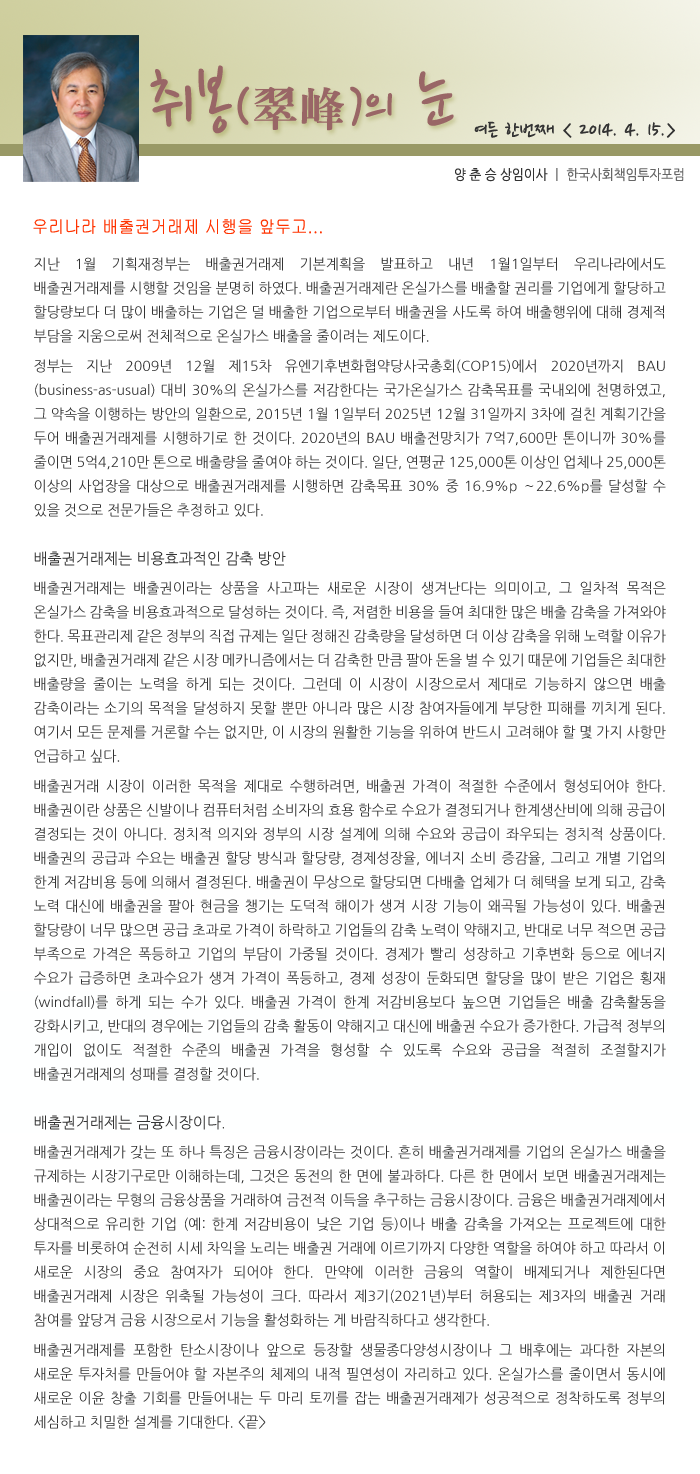
<style>
.page{position:relative;width:700px;height:1474px;background:#ffffff}
.page>*{position:absolute;margin:0}
.t1{font:77.5px "NanumPen";color:#996666}
.t2{font:60px "NanumPen";color:#996666}
.t3{font:48px "H2mjrE";color:#996666}
.t4{font:24px "NanumPen";color:#333333}
.t5{font:14px "NanumGothic";color:#666666;scale:0.9 1}
.t6{font:14px "NanumGothic";color:#333333;scale:0.9 1}
.t7{font:18px "Gulim";color:#ff3300;scale:0.9 1}
.t8{font:14px/24px "NanumGothic";color:#333333}
.t9{font:14px/6px "NanumGothic";color:#333333}
.t10{font:15px/24px "NanumGothic";color:#333333}
.t11{font:15px/6px "NanumGothic";color:#333333}
.t12{font:10px/24px "NanumGothic";color:#333333}
</style>
<div class="page">
<p class="t1" style="left:150px;top:65px;width:304px;height:69px">취봉<span class="t2">(</span><span class="t3">翠峰</span><span class="t2">)</span><span class="t2">의</span> 눈</p>
<p class="t4" style="left:474px;top:121px;width:201px;height:17px">여든 한번째 &lt; 2014. 4. 15.&gt;</p>
<p class="t5" style="left:455px;top:168px;width:229px;height:14px"><span class="t6">양 춘 승 상임이사 </span>ㅣ 한국사회책임투자포럼</p>
<p class="t7" style="left:33px;top:219px;width:289px;height:15px">우리나라 배출권거래제 시행을 앞두고...</p>
<p class="t8" style="left:34px;top:257px;width:632px;height:1172px;text-align:justify">지난 1월 기획재정부는 배출권거래제 기본계획을 발표하고 내년 1월1일부터 우리나라에서도 배출권거래제를 시행할 것임을 분명히 하였다. 배출권거래제란 온실가스를 배출할 권리를 기업에게 할당하고 할당량보다 더 많이 배출하는 기업은 덜 배출한 기업으로부터 배출권을 사도록 하여 배출행위에 대해 경제적 부담을 지움으로써 전<span class="t9">체적으로 온실가스 배출을 줄이려는 제도이다. <br><br>정부는 지난 2009년 12월 제</span>15차 유엔기후변화협약당사국총회(COP15)에서 2020년까지 BAU(business-as-usual) 대비 30%의 온실가스를 저감한다는 국가온실가스 감축목표를 국내외에 천명하였고, 그 약속을 이행하는 방안의 일환으로, 2015년 1월 1일부터 2025년 12월 31일까지 3차에 걸친 계획기간을 두어 배출권거래제를 시행하기로 한 것이다. 2020년의 BAU 배출전망치가 7억7,600만 톤이니까 30%를 줄이면 5억4,210만 톤으로 배출량을 줄여야 하는 것이다. 일단, 연평균 125,000톤 이상인 업체나 25,000톤 이상의 사업장을 대상으로 배출권거래제를 시행하면 감축목표 30% 중 16.9%p ∼22.6%p를 달성할 수 있을 것으로 전문가들은 추정하고 있다.<br><br><span class="t10">배출권거래제는 </span><span class="t11">비용효과적인 감축 방안<br><br></span><span class="t9">배출권거래제는 배출권이라는 상</span>품을 사고파는 새로운 시장이 생겨난다는 의미이고, 그 일차적 목적은 온실가스 감축을 비용효과적으로 달성하는 것이다. 즉, 저렴한 비용을 들여 최대한 많은 배출 감축을 가져와야 한다. 목표관리제 같은 정부의 직접 규제는 일단 정해진 감축량을 달성하면 더 이상 감축을 위해 노력할 이유가 없지만, 배출권거래제 같은 시장 메카니즘에서는 더 감축한 만큼 팔아 돈을 벌 수 있기 때문에 기업들은 최대한 배출량을 줄이는 노력을 하게 되는 것이다. 그런데 이 시장이 시장으로서 제대로 기능하지 않으면 배출 감축이라는 소기의 목적을 달성하지 못할 뿐만 아니라 많은 시장 참여자들에게 부당한 피해를 끼치게 된다. 여기서 모든 문제를 거론할 수는 없지만, 이 시장의 원활한 기능을 위하여 반드시 고려해야 할 몇 가지 사항만 언<span class="t9">급하고 싶다.<br><br>배출권거래 시장</span>이 이러한 목적을 제대로 수행하려면, 배출권 가격이 적절한 수준에서 형성되어야 한다. 배출권이란 상품은 신발이나 컴퓨터처럼 소비자의 효용 함수로 수요가 결정되거나 한계생산비에 의해 공급이 결정되는 것이 아니다. 정치적 의지와 정부의 시장 설계에 의해 수요와 공급이 좌우되는 정치적 상품이다. 배출권의 공급과 수요는 배출권 할당 방식과 할당량, 경제성장율, 에너지 소비 증감율, 그리고 개별 기업의 한계 저감비용 등에 의해서 결정된다. 배출권이 무상으로 할당되면 다배출 업체가 더 혜택을 보게 되고, 감축 노력 대신에 배출권을 팔아 현금을 챙기는 도덕적 해이가 생겨 시장 기능이 왜곡될 가능성이 있다. 배출권 할당량이 너무 많으면 공급 초과로 가격이 하락하고 기업들의 감축 노력이 약해지고, 반대로 너무 적으면 공급 부족으로 가격은 폭등하고 기업의 부담이 가중될 것이다. 경제가 빨리 성장하고 기후변화 등으로 에너지 수요가 급증하면 초과수요가 생겨 가격이 폭등하고, 경제 성장이 둔화되면 할당을 많이 받은 기업은 횡재(windfall)를 하게 되는 수가 있다. 배출권 가격이 한계 저감비용보다 높으면 기업들은 배출 감축활동을 강화시키고, 반대의 경우에는 기업들의 감축 활동이 약해지고 대신에 배출권 수요가 증가한다. 가급적 정부의 개입이 없이도 적절한 수준의 배출권 가격을 형성할 수 있도록 수요와 공급을 적절히 조절할지가 배출권거래제의 성패를 결정할 것이다.<br><br><span class="t10">배출권거래</span><span class="t11">제는 금융시장이다. <br><br></span><span class="t9">배출권거래제가 갖는 또</span> 하나 특징은 금융시장이라는 것이다. 흔히 배출권거래제를 기업의 온실가스 배출을 규제하는 시장기구로만 이해하는데, 그것은 동전의 한 면에 불과하다. 다른 한 면에서 보면 배출권거래제는 배출권이라는 무형의 금융상품을 거래하여 금전적 이득을 추구하는 금융시장이다. 금융은 배출권거래제에서 상대적으로 유리한 기업 (예: 한계 저감비용이 낮은 기업 등)이나 배출 감축을 가져오는 프로젝트에 대한 투자를 비롯하여 순전히 시세 차익을 노리는 배출권 거래에 이르기까지 다양한 역할을 하여야 하고 따라서 이 새로운 시장의 중요 참여자가 되어야 한다. 만약에 이러한 금융의 역할이 배제되거나 제한된다면 배출권거래제 시장은 위축될 가능성이 크다. 따라서 제3기(2021년)부터 허용되는 제3자의 배출권 거래 참여를 앞당겨 금융 시장으로서 기능을 활<span class="t9">성화하는 게 바람직하다고 생각한다. <br><br>배출권거래제를 포함한 탄소시장이나 앞으로 등장할 생물종</span>다양성시장이나 그 배후에는 과다한 자본의 새로운 투자처를 만들어야 할 자본주의 체제의 내적 필연성이 자리하고 있다. 온실가스를 줄이면서 동시에 새로운 이윤 창출 기회를 만들어내는 두 마리 토끼를 잡는 배출권거래제가 성공적으로 정착하도록 정부의 세심하고 치밀한 설계를 기대한다. &lt;끝&gt;<br> &lt;끝&gt;<br><br><span class="t12"> 1) 세계일보 2014년 3월 5일 기사 참조</span></p>
</div>
